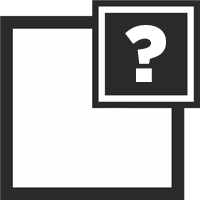
<style>
.page{position:relative;width:200px;height:200px;background:#fefefe}
.page>*{position:absolute;margin:0}
.t1{font:80px "Gotham-Black";color:#ffffff}
</style>
<div class="page">
<p class="t1" style="left:125px;top:25px;width:41px;height:57px">?</p>
</div>
